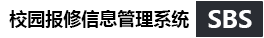
<style>
.page{position:relative;width:264px;height:38px;background:#ffffff}
.page>*{position:absolute;margin:0}
.t1{font:18px "MicrosoftYaHeiUI-Bold";color:#000000}
.t2{font:24px "MicrosoftYaHeiUI-Bold";color:#fefefe}
</style>
<div class="page">
<p class="t1" style="left:9px;top:10px;width:180px;height:18px">校园报修信息管理系统</p>
<p class="t2" style="left:208px;top:10px;width:44px;height:18px">SBS</p>
</div>
